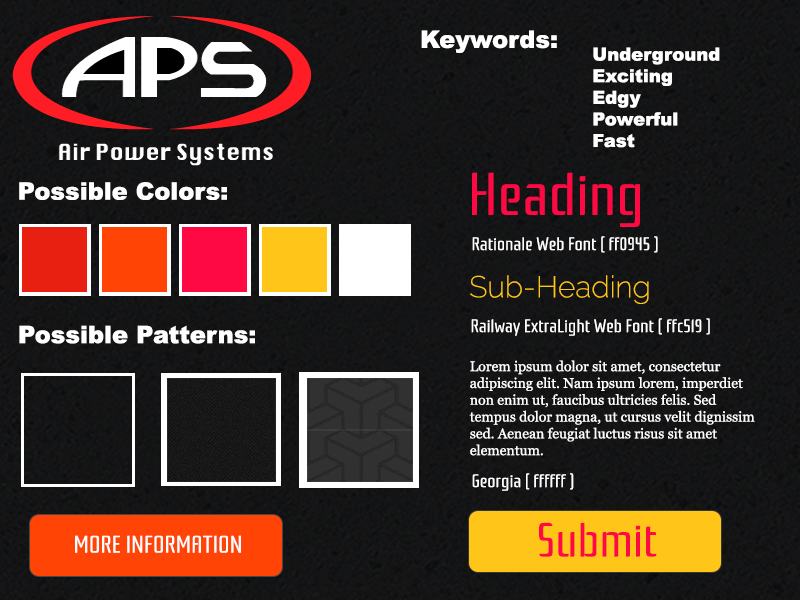
<style>
.page{position:relative;width:800px;height:600px}
.page>*{position:absolute;margin:0}
.t1{font:24px "Arial-Black";color:#ffffff}
.t2{font:18px "Arial-Black";color:#ffffff}
.t3{font:60px "Rationale-Regular";color:#ff0945}
.t4{font:18px "Rationale-Regular";color:#ffffff}
.t5{font:30px "Raleway-ExtraLight";color:#ffc519}
.t6{font:14px "Georgia";color:#ffffff}
.t7{font:48px "Rationale-Regular";color:#ff0945}
.t8{font:30px "Rationale-Regular";color:#ff0945}
.t9{font:24px "Rationale-Regular";color:#ffffff}
</style>
<div class="page">
<p class="t1" style="left:421px;top:30px;width:136px;height:23px">Keywords:</p>
<p class="t2" style="left:593px;top:47px;width:127px;height:101px">Underground<br>Exciting<br>Edgy<br>Powerful<br>Fast</p>
<p class="t3" style="left:472px;top:172px;width:168px;height:55px">Heading</p>
<p class="t1" style="left:19px;top:182px;width:208px;height:18px">Possible Colors:</p>
<p class="t4" style="left:472px;top:236px;width:186px;height:17px">Rationale Web Font ( ff0945 )</p>
<p class="t5" style="left:470px;top:275px;width:179px;height:29px">Sub-Heading</p>
<p class="t4" style="left:471px;top:318px;width:239px;height:18px">Railway ExtraLight Web Font ( ffc519 )</p>
<p class="t1" style="left:19px;top:325px;width:236px;height:19px">Possible Patterns:</p>
<p class="t6" style="left:469px;top:360px;width:286px;height:96px">Lorem ipsum dolor sit amet, consectetur <br>adipiscing elit. Nam ipsum lorem, imperdiet <br>non enim ut, faucibus ultricies felis. Sed <br>tempus dolor magna, ut cursus velit dignissim <br>sed. Aenean feugiat luctus risus sit amet <br>elementum.</p>
<p class="t4" style="left:472px;top:473px;width:102px;height:18px">Georgia ( ffffff )</p>
<p class="t7" style="left:539px;top:522px;width:118px;height:35px"><span class="t8"><br></span>Submit</p>
<p class="t9" style="left:75px;top:535px;width:166px;height:18px">MORE INFORMATION</p>
</div>
